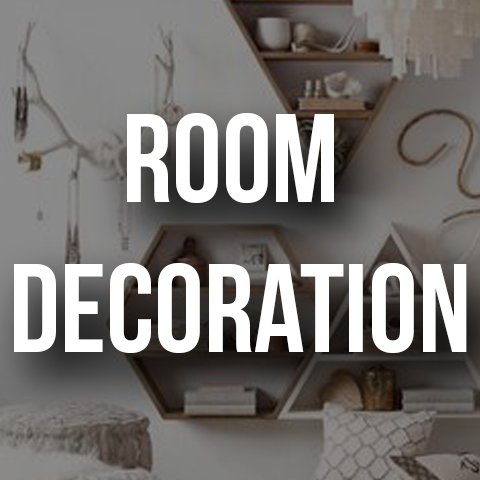
<style>
.page{position:relative;width:480px;height:480px}
.page>*{position:absolute;margin:0}
.t1{font:125px "BebasNeue";color:#ffffff}
</style>
<div class="page">
<p class="t1" style="left:14px;top:113px;width:453px;height:240px;text-align:center">Room <br>decoration</p>
</div>
